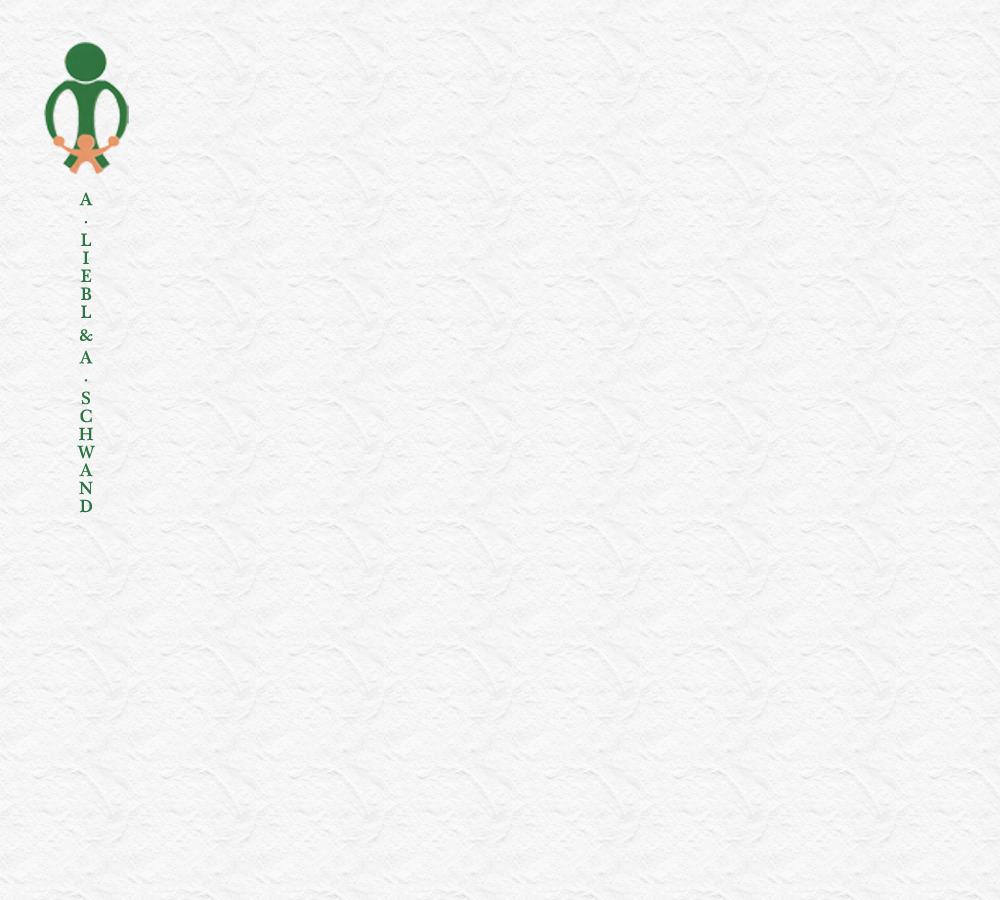
<style>
.page{position:relative;width:1000px;height:900px}
.page>*{position:absolute;margin:0}
.t1{font:18px "PlantagenetCherokee";color:#2f7543}
</style>
<div class="page">
<p class="t1" style="left:77px;top:192px;width:18px;height:321px">A. LIEBL &amp; A. SCHWAND</p>
</div>
